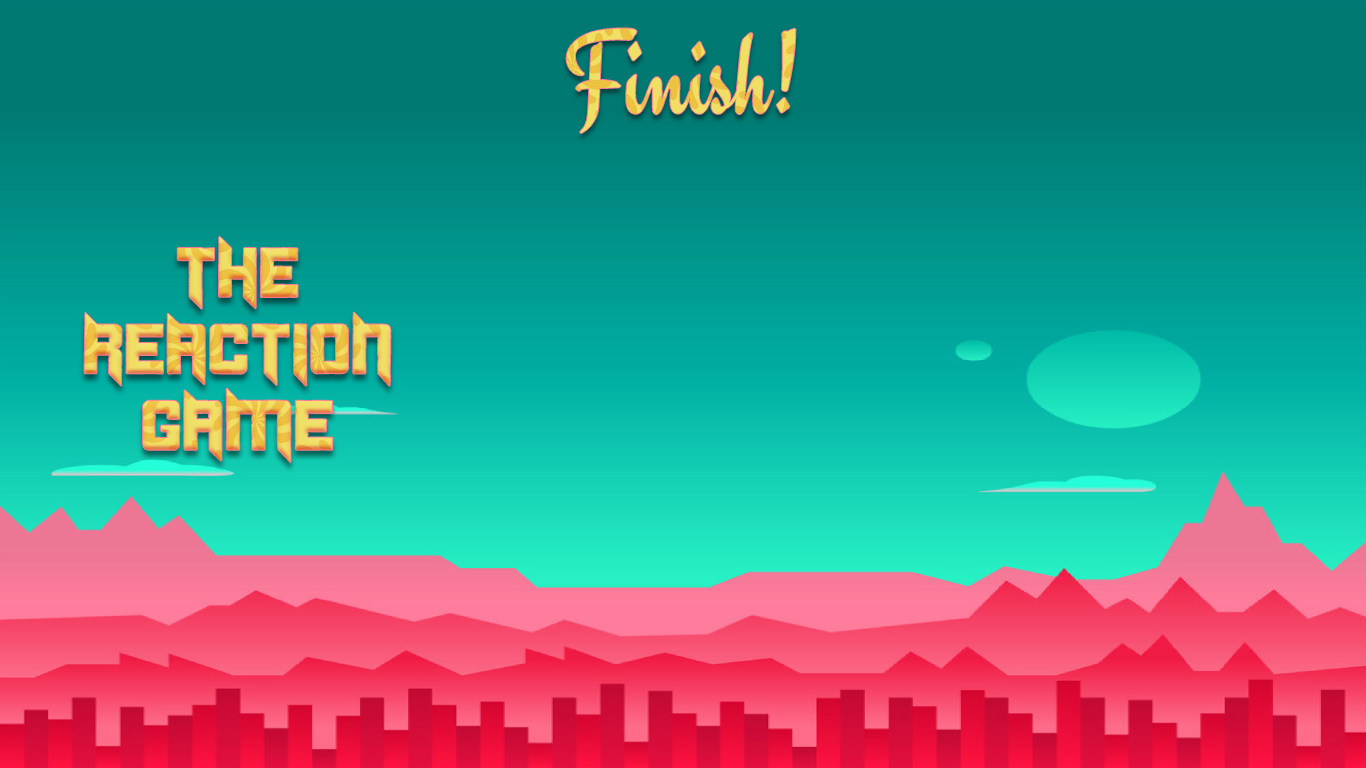
<style>
.page{position:relative;width:1366px;height:768px}
.page>*{position:absolute;margin:0}
.t1{font:120px "Engagement-Regular";color:#f0e068}
.t2{font:120px "Engagement-Regular";color:#000000}
.t3{font:70px "Duplexide"}
</style>
<div class="page">
<p class="t1" style="left:566px;top:28px;width:230px;height:106px">Finish<span class="t2">!</span></p>
<p class="t3" style="left:84px;top:236px;width:307px;height:227px;text-align:center">THE<br>REACTION<br>GAME</p>
</div>
